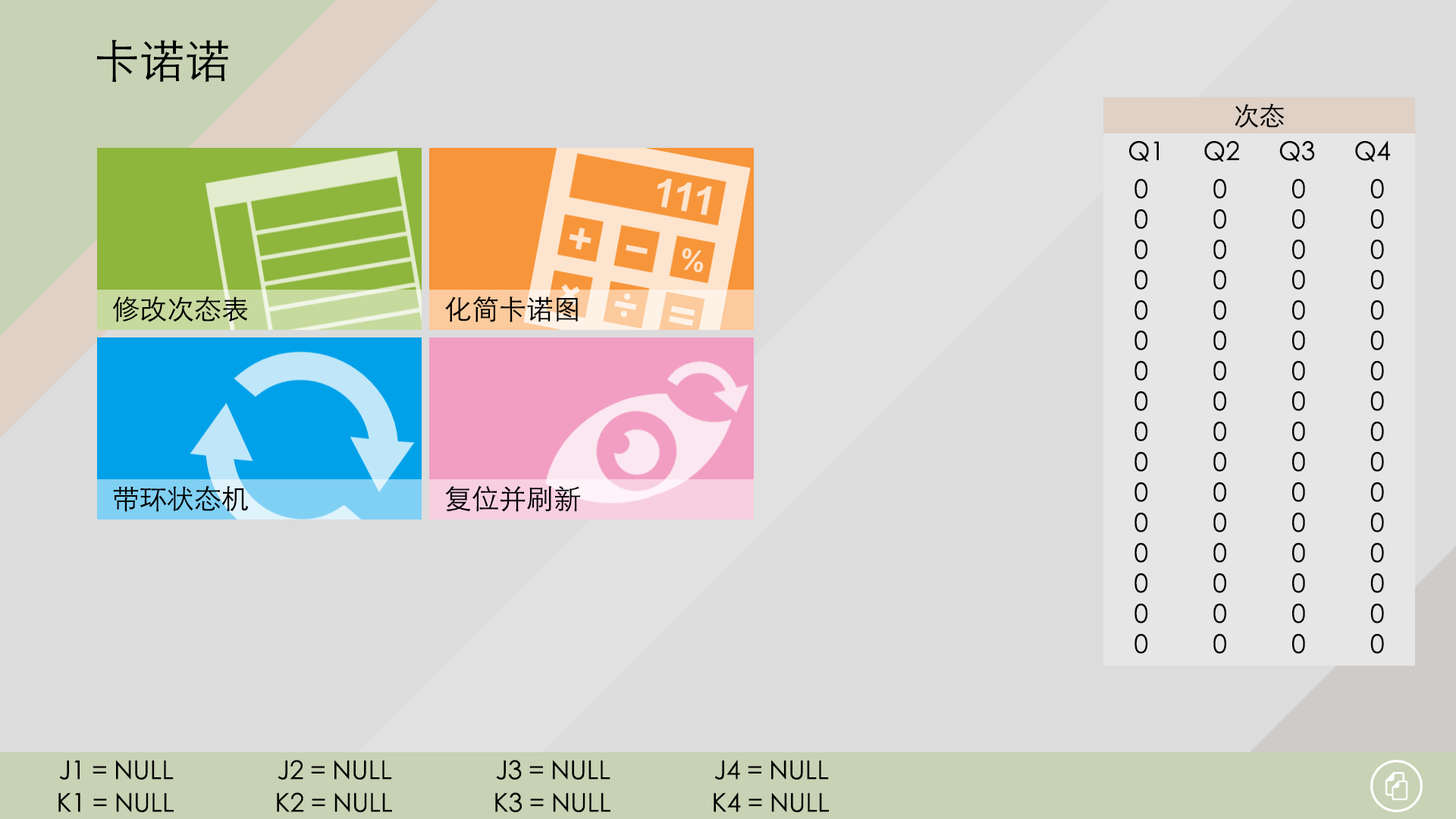
<style>
.page{position:relative;width:1456px;height:819px;background:#dcdcdc}
.page>*{position:absolute;margin:0}
.t1{font:45.5px "STXihei";color:#000000}
.t2{font:25.8px "STXihei";color:#000000}
.t3{font:27.3px "STXihei";color:#000000}
</style>
<div class="page">
<p class="t1" style="left:97px;top:39px;width:131px;height:43px">卡诺诺</p>
<p class="t2" style="left:1235px;top:103px;width:50px;height:25px">次态</p>
<p class="t2" style="left:1129px;top:140px;width:261px;height:22px">Q1      Q2      Q3      Q4</p>
<p class="t2" style="left:1134px;top:178px;width:250px;height:21px">0          0          0          0</p>
<p class="t2" style="left:1134px;top:209px;width:250px;height:20px">0          0          0          0</p>
<p class="t2" style="left:1134px;top:239px;width:250px;height:20px">0          0          0          0</p>
<p class="t2" style="left:1134px;top:269px;width:250px;height:21px">0          0          0          0</p>
<p class="t3" style="left:112px;top:296px;width:136px;height:26px">修改次态表</p>
<p class="t3" style="left:445px;top:296px;width:133px;height:26px">化简卡诺图</p>
<p class="t2" style="left:1134px;top:300px;width:250px;height:20px">0          0          0          0</p>
<p class="t2" style="left:1134px;top:330px;width:250px;height:20px">0          0          0          0</p>
<p class="t2" style="left:1134px;top:360px;width:250px;height:21px">0          0          0          0</p>
<p class="t2" style="left:1134px;top:391px;width:250px;height:20px">0          0          0          0</p>
<p class="t2" style="left:1134px;top:421px;width:250px;height:20px">0          0          0          0</p>
<p class="t2" style="left:1134px;top:451px;width:250px;height:21px">0          0          0          0</p>
<p class="t3" style="left:113px;top:485px;width:135px;height:27px">带环状态机</p>
<p class="t3" style="left:445px;top:485px;width:135px;height:27px">复位并刷新</p>
<p class="t2" style="left:1134px;top:482px;width:250px;height:20px">0          0          0          0</p>
<p class="t2" style="left:1134px;top:512px;width:250px;height:20px">0          0          0          0</p>
<p class="t2" style="left:1134px;top:542px;width:250px;height:21px">0          0          0          0</p>
<p class="t2" style="left:1134px;top:573px;width:250px;height:20px">0          0          0          0</p>
<p class="t2" style="left:1134px;top:603px;width:250px;height:20px">0          0          0          0</p>
<p class="t2" style="left:1134px;top:633px;width:250px;height:21px">0          0          0          0</p>
<p class="t2" style="left:59px;top:760px;width:770px;height:20px">J1 = NULL    J2 = NULL    J3 = NULL    J4 = NULL</p>
<p class="t2" style="left:58px;top:792px;width:771px;height:20px">K1 = NULL    K2 = NULL    K3 = NULL    K4 = NULL</p>
</div>
